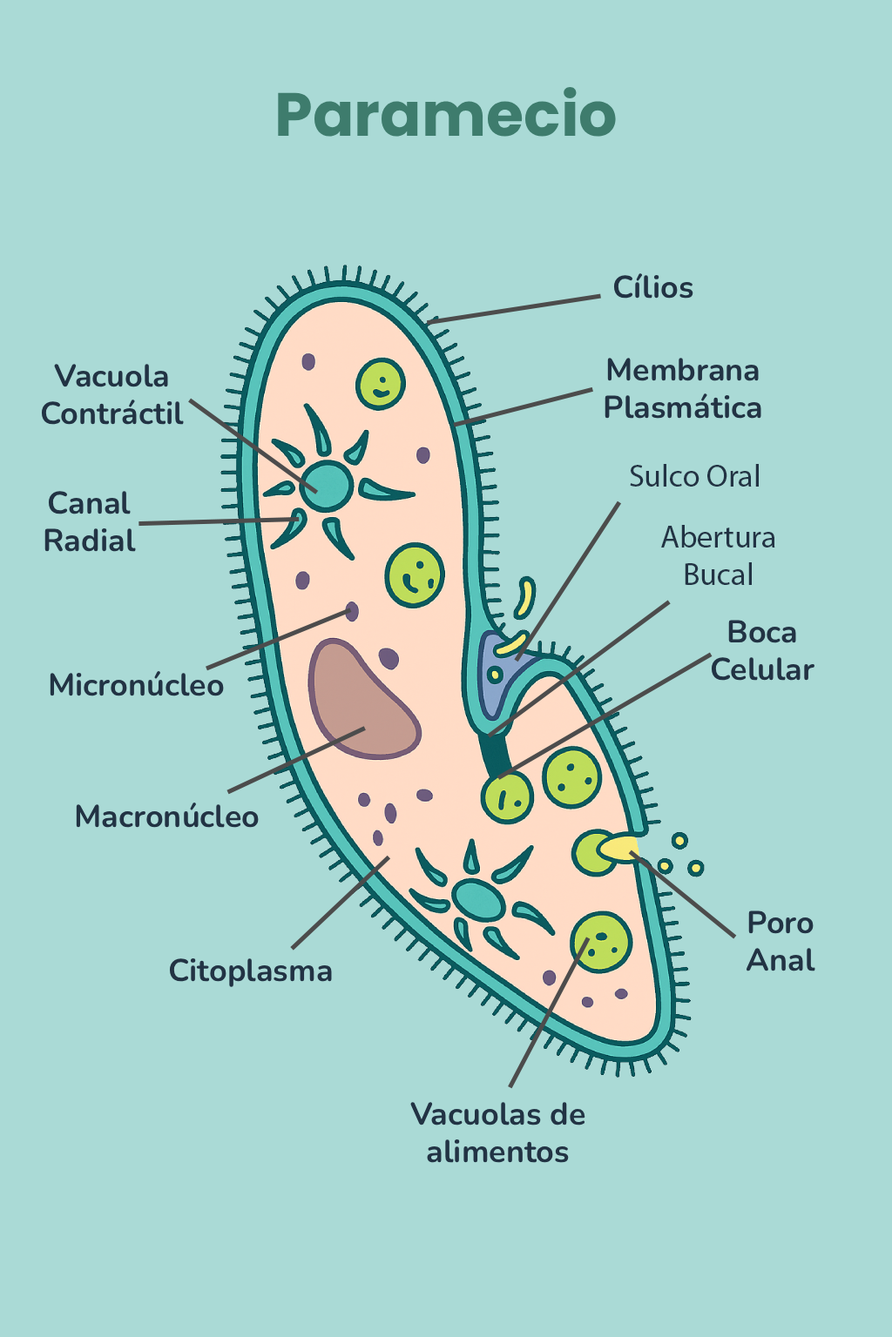
<style>
.page{position:relative;width:892px;height:1337px;background:#aadad6}
.page>*{position:absolute;margin:0}
.t1{font:60.9px "Poppins-Bold";color:#3e7c6d}
.t2{font:31.3px "Nunito-Bold";color:#223344}
.t3{font:31.3px "MyriadPro-Regular";color:#223344}
</style>
<div class="page">
<p class="t1" style="left:278px;top:86px;width:338px;height:51px">Paramecio</p>
<p class="t2" style="left:613px;top:273px;width:80px;height:26px">Cílios</p>
<p class="t2" style="left:41px;top:364px;width:143px;height:61px;text-align:center">Vacuola<br>Contráctil</p>
<p class="t2" style="left:604px;top:358px;width:157px;height:61px;text-align:center">Membrana Plasmática</p>
<p class="t3" style="left:630px;top:464px;width:128px;height:23px">Sulco Oral</p>
<p class="t2" style="left:44px;top:491px;width:92px;height:61px;text-align:center">Canal Radial</p>
<p class="t3" style="left:661px;top:525px;width:114px;height:60px;text-align:center">Abertura Bucal</p>
<p class="t2" style="left:710px;top:620px;width:105px;height:61px;text-align:center">Boca Celular</p>
<p class="t2" style="left:50px;top:670px;width:174px;height:27px">Micronúcleo</p>
<p class="t2" style="left:76px;top:802px;width:183px;height:26px">Macronúcleo</p>
<p class="t2" style="left:745px;top:911px;width:70px;height:61px;text-align:center">Poro Anal</p>
<p class="t2" style="left:169px;top:959px;width:163px;height:28px">Citoplasma</p>
<p class="t2" style="left:410px;top:1102px;width:175px;height:61px;text-align:center">Vacuolas de alimentos</p>
</div>
